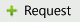
<style>
.page{position:relative;width:80px;height:22px;background:#e9ebe9}
.page>*{position:absolute;margin:0}
.t1{font:13px "MalgunGothicRegular";color:#060606}
</style>
<div class="page">
<p class="t1" style="left:25px;top:5px;width:46px;height:13px">Request</p>
</div>
